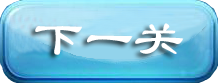
<style>
.page{position:relative;width:218px;height:83px}
.page>*{position:absolute;margin:0}
.t1{font:50px "LiSu";color:#ffffff}
</style>
<div class="page">
<p class="t1" style="left:35px;top:23px;width:149px;height:32px">下一关</p>
</div>
